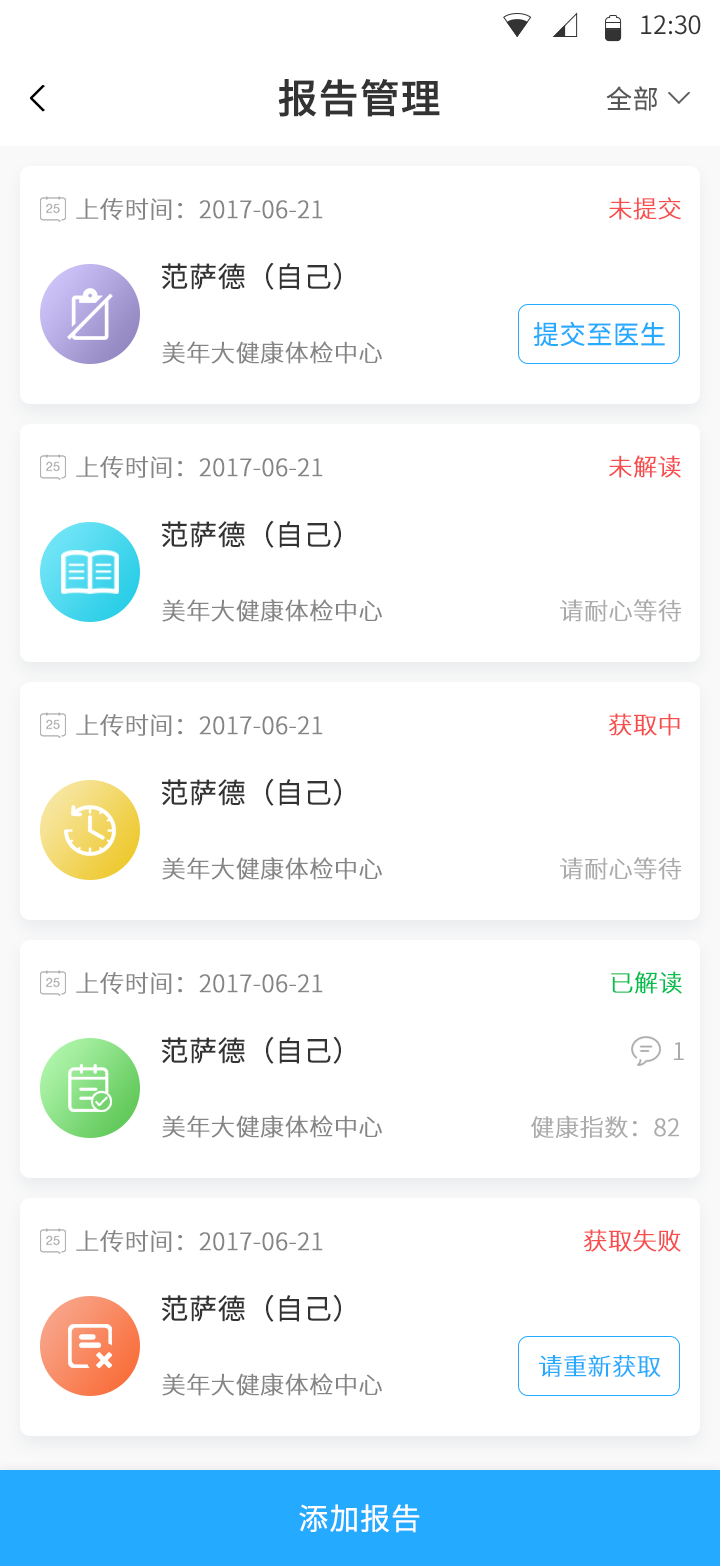
<style>
.page{position:relative;width:720px;height:1566px;background:#ffffff}
.page>*{position:absolute;margin:0}
.t1{font:25.4px "SourceHanSansCN-Normal";color:#333333}
.t2{font:40px "SourceHanSansCN-Medium";color:#333333;font-weight:bold}
.t3{font:26px "SourceHanSansCN-Normal";color:#575757;font-weight:bold}
.t4{font:24px "SourceHanSansCN-Light";color:#858585;font-weight:bold}
.t5{font:24px "SourceHanSansCN-Light";color:#f84d4d;font-weight:bold}
.t6{font:28px "SourceHanSansCN-Normal";color:#333333;font-weight:bold}
.t7{font:26px "SourceHanSansCN-Normal";color:#24aaff;font-weight:bold}
.t8{font:24px "SourceHanSansCN-Light";color:#ababab;font-weight:bold}
.t9{font:24px "SourceHanSansCN-Light";color:#00bf4e;font-weight:bold}
.t10{font:24px "SourceHanSansCN-Light";color:#24aaff;font-weight:bold}
.t11{font:30px "SourceHanSansCN-Normal";color:#ffffff;font-weight:bold}
</style>
<div class="page">
<p class="t1" style="left:641px;top:15px;width:60px;height:20px">12:30</p>
<p class="t2" style="left:278px;top:79px;width:162px;height:38px">报告管理</p>
<p class="t3" style="left:606px;top:86px;width:52px;height:25px">全部</p>
<p class="t4" style="left:76px;top:198px;width:247px;height:22px">上传时间：2017-06-21</p>
<p class="t5" style="left:609px;top:197px;width:72px;height:23px">未提交</p>
<p class="t6" style="left:162px;top:262px;width:179px;height:28px">范萨德（自己）</p>
<p class="t7" style="left:533px;top:321px;width:132px;height:26px">提交至医生</p>
<p class="t4" style="left:162px;top:341px;width:220px;height:23px">美年大健康体检中心</p>
<p class="t4" style="left:76px;top:456px;width:247px;height:22px">上传时间：2017-06-21</p>
<p class="t5" style="left:609px;top:455px;width:72px;height:23px">未解读</p>
<p class="t6" style="left:162px;top:520px;width:179px;height:28px">范萨德（自己）</p>
<p class="t4" style="left:162px;top:599px;width:220px;height:23px">美年大健康体检中心</p>
<p class="t8" style="left:560px;top:599px;width:121px;height:23px">请耐心等待</p>
<p class="t5" style="left:609px;top:713px;width:71px;height:23px">获取中</p>
<p class="t4" style="left:76px;top:714px;width:247px;height:22px">上传时间：2017-06-21</p>
<p class="t6" style="left:162px;top:778px;width:179px;height:28px">范萨德（自己）</p>
<p class="t4" style="left:162px;top:857px;width:220px;height:23px">美年大健康体检中心</p>
<p class="t8" style="left:560px;top:857px;width:121px;height:23px">请耐心等待</p>
<p class="t4" style="left:76px;top:972px;width:247px;height:22px">上传时间：2017-06-21</p>
<p class="t9" style="left:611px;top:971px;width:71px;height:23px">已解读</p>
<p class="t6" style="left:162px;top:1036px;width:179px;height:28px">范萨德（自己）</p>
<p class="t8" style="left:674px;top:1042px;width:10px;height:18px">1</p>
<p class="t4" style="left:162px;top:1115px;width:220px;height:23px">美年大健康体检中心</p>
<p class="t8" style="left:531px;top:1115px;width:148px;height:23px">健康指数：82</p>
<p class="t4" style="left:76px;top:1230px;width:247px;height:22px">上传时间：2017-06-21</p>
<p class="t5" style="left:584px;top:1229px;width:97px;height:23px">获取失败</p>
<p class="t6" style="left:162px;top:1294px;width:179px;height:28px">范萨德（自己）</p>
<p class="t10" style="left:539px;top:1355px;width:122px;height:22px">请重新获取</p>
<p class="t4" style="left:162px;top:1373px;width:220px;height:23px">美年大健康体检中心</p>
<p class="t11" style="left:299px;top:1504px;width:121px;height:29px">添加报告</p>
</div>
